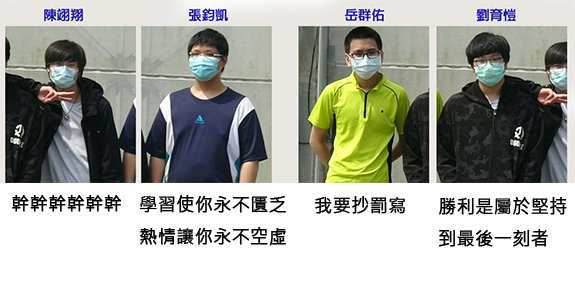
<style>
.page{position:relative;width:575px;height:302px;background:#ffffff}
.page>*{position:absolute;margin:0}
.t1{font:18px "MicrosoftJhengHeiRegular";color:#000000;font-weight:bold}
</style>
<div class="page">
<p class="t1" style="left:12px;top:195px;width:110px;height:17px">幹幹幹幹幹幹</p>
<p class="t1" style="left:139px;top:195px;width:147px;height:51px">學習使你永不匱乏<br>熱情讓你永不空虛</p>
<p class="t1" style="left:315px;top:196px;width:90px;height:18px">我要抄罰寫</p>
<p class="t1" style="left:439px;top:197px;width:128px;height:50px">勝利是屬於堅持<br>到最後一刻者</p>
</div>
